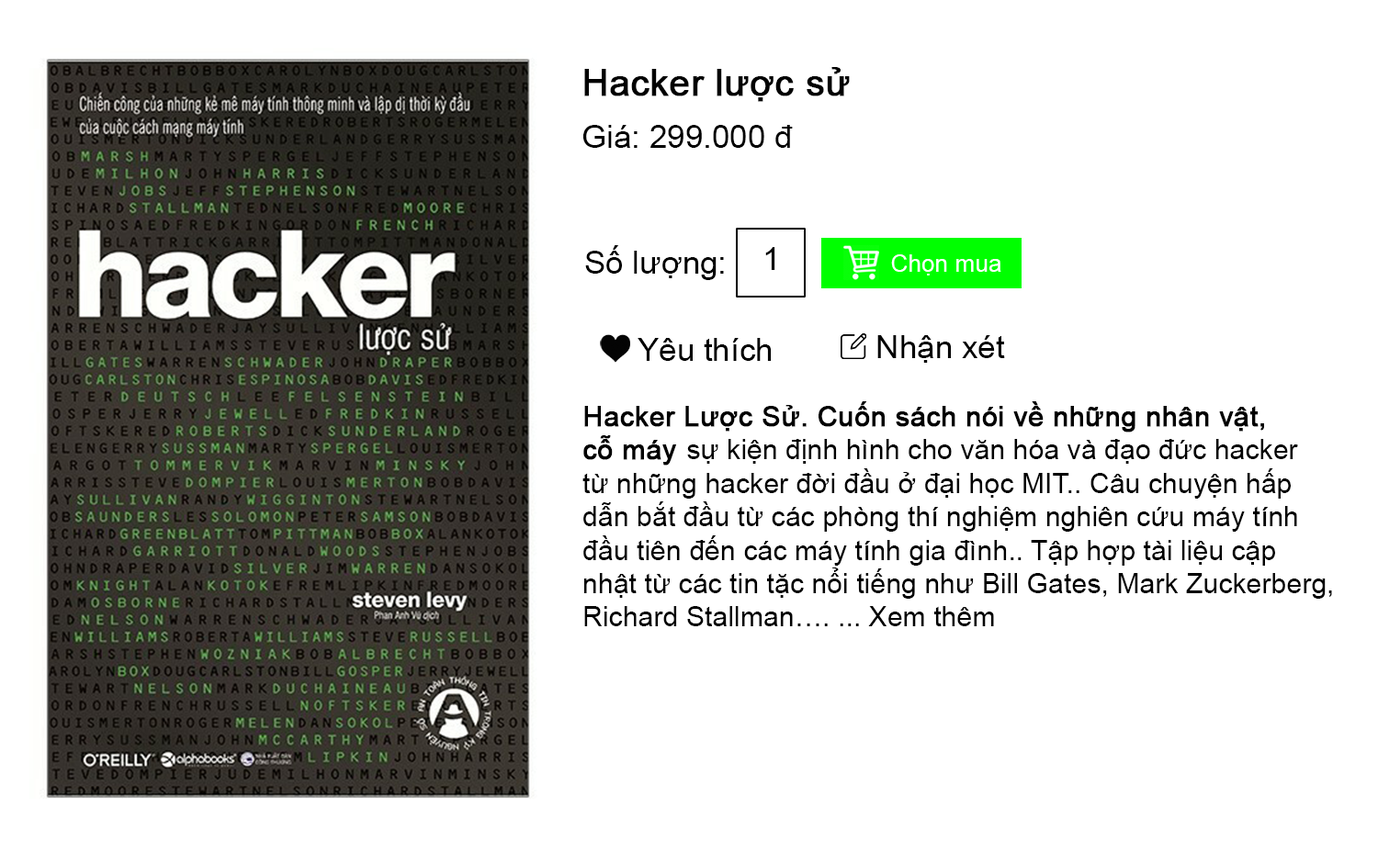
<style>
.page{position:relative;width:1378px;height:865px;background:#ffffff}
.page>*{position:absolute;margin:0}
.t1{font:36.8px "ArialMT";color:#000000;font-weight:bold}
.t2{font:32.2px "ArialMT";color:#000000}
.t3{font:23.8px "ArialMT";color:#ffffff}
.t4{font:27.8px "ArialMT";color:#000000;font-weight:bold}
.t5{font:27.8px "ArialMT";color:#000000}
</style>
<div class="page">
<p class="t1" style="left:584px;top:67px;width:266px;height:35px">Hacker lược sử</p>
<p class="t2" style="left:582px;top:125px;width:211px;height:23px">Giá: 299.000 đ</p>
<p class="t2" style="left:585px;top:245px;width:139px;height:35px">Số lượng:</p>
<p class="t2" style="left:765px;top:247px;width:10px;height:23px">1</p>
<p class="t3" style="left:891px;top:254px;width:110px;height:22px">Chọn mua</p>
<p class="t2" style="left:638px;top:338px;width:134px;height:23px">Yêu thích</p>
<p class="t2" style="left:877px;top:335px;width:128px;height:28px">Nhận xét</p>
<p class="t4" style="left:583px;top:401px;width:681px;height:65px">Hacker Lược Sử. Cuốn sách nói về những nhân vật, <br>cỗ máy</p>
<p class="t5" style="left:687px;top:439px;width:611px;height:25px">sự kiện định hình cho văn hóa và đạo đức hacker</p>
<p class="t5" style="left:582px;top:469px;width:750px;height:158px">từ những hacker đời đầu ở đại học MIT.. Câu chuyện hấp <br>dẫn bắt đầu từ các phòng thí nghiệm nghiên cứu máy tính <br>đầu tiên đến các máy tính gia đình.. Tập hợp tài liệu cập <br>nhật từ các tin tặc nổi tiếng như Bill Gates, Mark Zuckerberg, <br>Richard Stallman…. ... Xem thêm</p>
</div>
